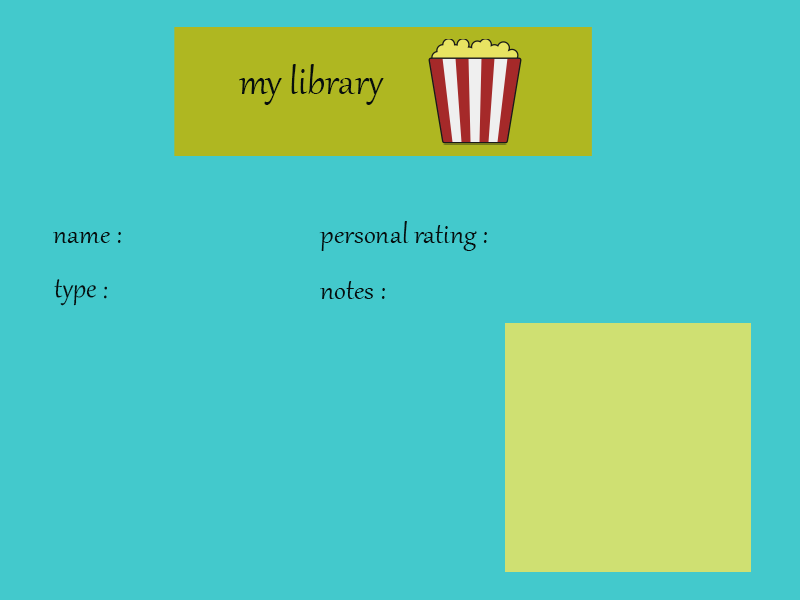
<style>
.page{position:relative;width:800px;height:600px;background:#43c9cc}
.page>*{position:absolute;margin:0}
.t1{font:45.8px "Gabriola";color:#070e0e}
.t2{font:33.3px "Gabriola";color:#070e0e}
</style>
<div class="page">
<p class="t1" style="left:239px;top:64px;width:145px;height:41px">my library</p>
<p class="t2" style="left:319px;top:221px;width:168px;height:30px">personal rating :</p>
<p class="t2" style="left:53px;top:232px;width:68px;height:11px">name :</p>
<p class="t2" style="left:54px;top:279px;width:53px;height:27px;rotate:1deg">type :</p>
<p class="t2" style="left:320px;top:281px;width:65px;height:18px">notes :</p>
</div>
